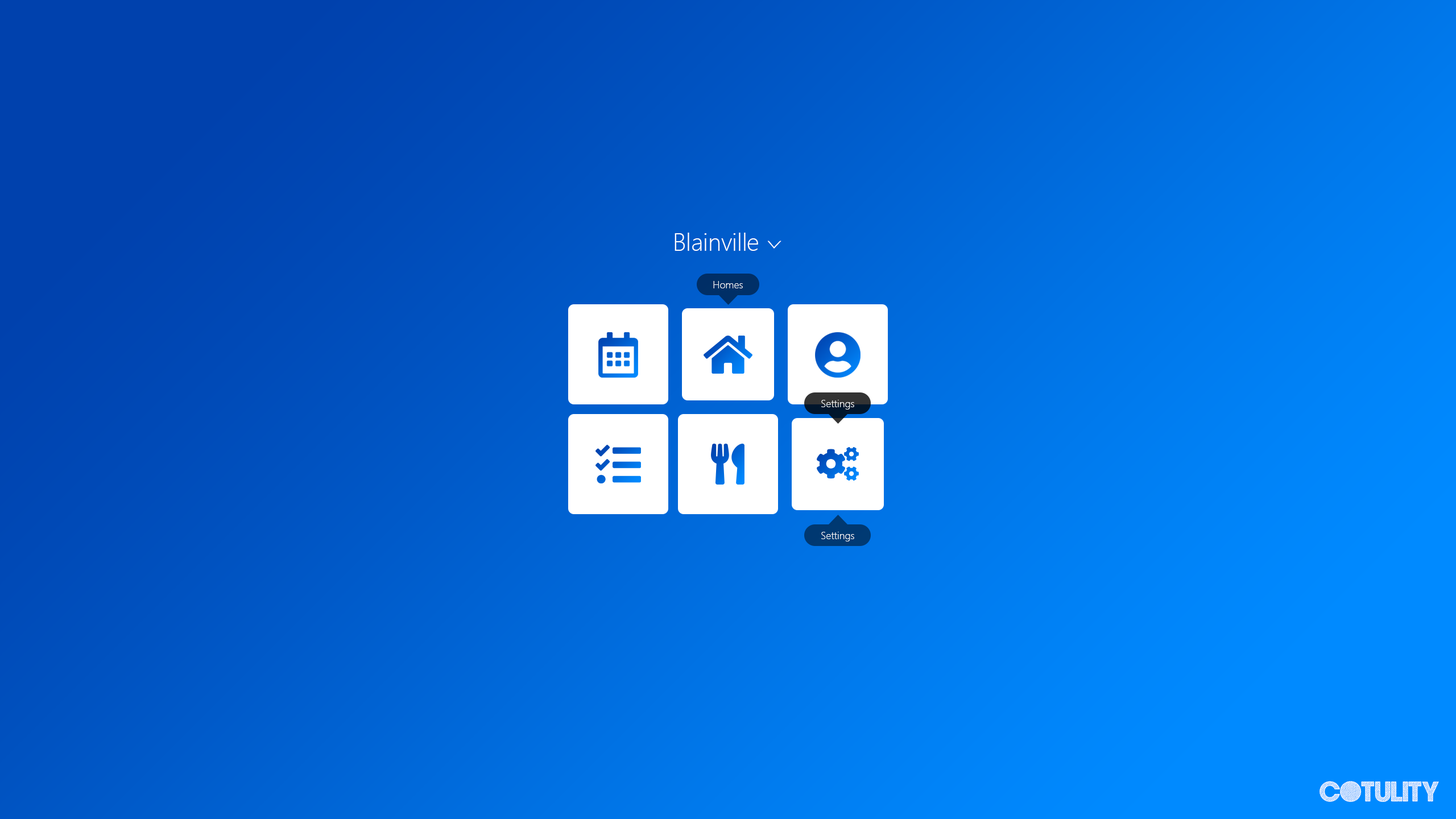
<style>
.page{position:relative;width:1456px;height:819px}
.page>*{position:absolute;margin:0}
.t1{font:24.3px "SegoeUI-Light";color:#ffffff}
.t2{font:30.6px "SegoeUI-Light";color:#ffffff;scale:0.59 1}
.t3{font:10.2px "SegoeUI-Light";color:#ffffff}
.t4{font:26.3px "GoodMorningAfternoonDEMO";color:#ffffff}
</style>
<div class="page">
<p class="t1" style="left:675px;top:233px;width:83px;height:18px">Blainville</p>
<p class="t2" style="left:767px;top:241px;width:14px;height:8px;rotate:90deg">&gt;</p>
<p class="t3" style="left:713px;top:281px;width:30px;height:7px">Homes</p>
<p class="t3" style="left:821px;top:400px;width:33px;height:9px">Settings</p>
<p class="t3" style="left:821px;top:532px;width:33px;height:9px">Settings</p>
<p class="t4" style="left:1319px;top:781px;width:120px;height:21px">Cotulity</p>
</div>
